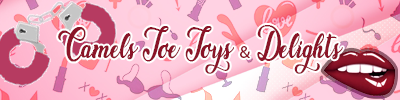
<style>
.page{position:relative;width:400px;height:100px}
.page>*{position:absolute;margin:0}
.t1{font:17.7px "Amsterdam";letter-spacing:-0.013em;color:#8b1427}
.t2{font:17.7px "MyriadPro-Regular";letter-spacing:-0.013em;color:#8b1427}
</style>
<div class="page">
<p class="t1" style="left:58px;top:25px;width:285px;height:49px;text-align:center">Camels Toe Toys <span class="t2">&amp;</span> Delights</p>
</div>
